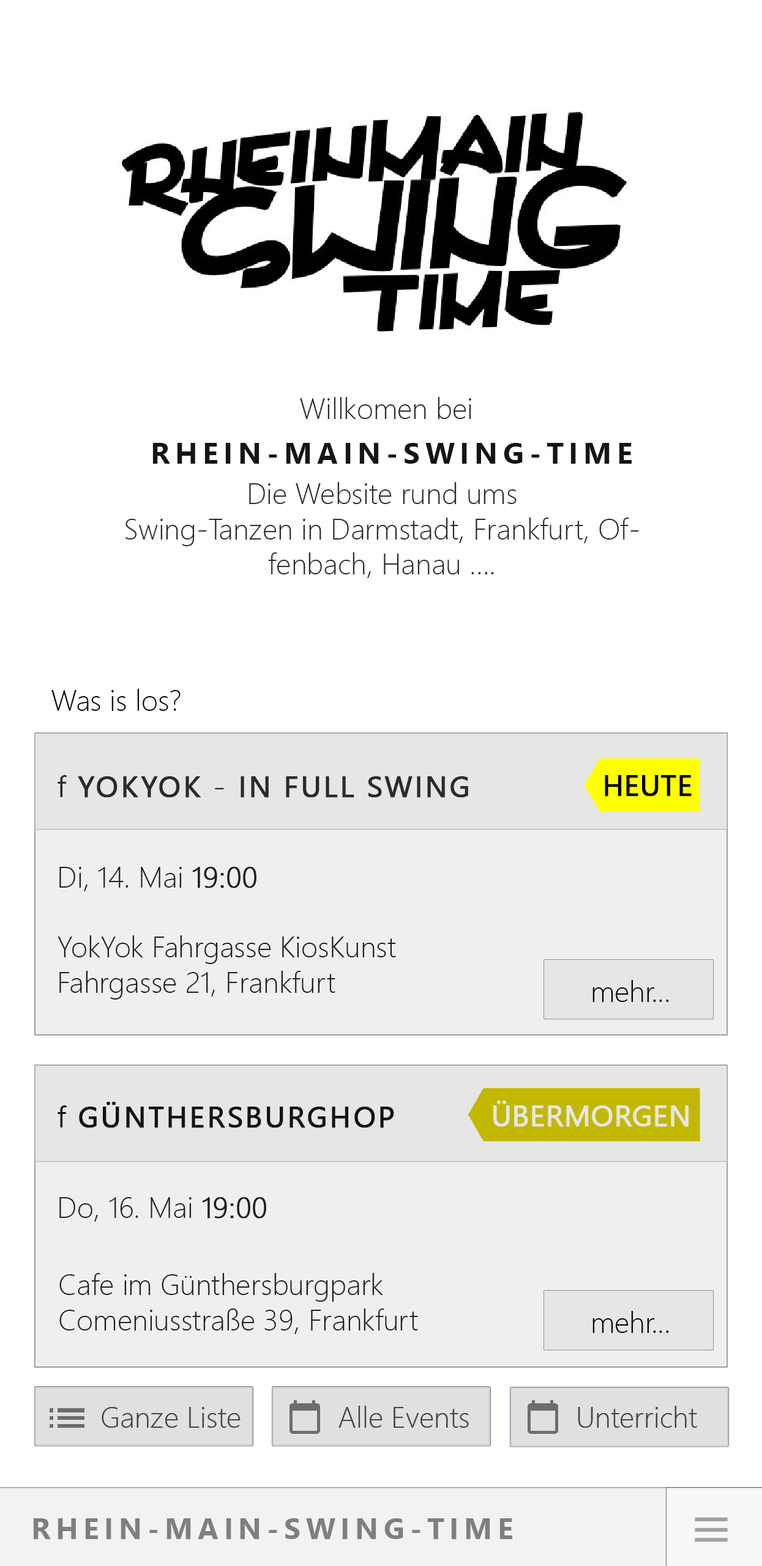
<style>
.page{position:relative;width:762px;height:1566px;background:#ffffff}
.page>*{position:absolute;margin:0}
.t1{font:29.4px "SegoeUI-Light";color:#2e2d2c}
.t2{font:29.4px "SegoeUI-Bold";letter-spacing:0.18em;color:#161616;text-transform:uppercase}
.t3{font:29.4px "SegoeUI-Light";color:#000000}
.t4{font:29.4px "SegoeUI";letter-spacing:0.06em;color:#2b2a29;text-transform:uppercase;font-weight:bold}
.t5{font:29.4px "SegoeUI";letter-spacing:0.06em;color:#2b2a29}
.t6{font:29.4px "SegoeUI";color:#000000;font-weight:bold}
.t7{font:29.4px "SegoeUI-Light";color:#1f1e1e}
.t8{font:29.4px "SegoeUI-Light";color:#1f1e1e;font-weight:bold}
.t9{font:29.4px "SegoeUI";letter-spacing:0.06em;color:#151414;text-transform:uppercase;font-weight:bold}
.t10{font:29.4px "SegoeUI";letter-spacing:0.06em;color:#151414}
.t11{font:29.4px "SegoeUI";color:#e6e6e6;text-transform:uppercase;font-weight:bold}
.t12{font:29.4px "SegoeUI-Light";color:#21201f}
.t13{font:29.4px "SegoeUI-Light";color:#21201f;font-weight:bold}
.t14{font:29.4px "SegoeUI-Light";color:#41464a}
.t15{font:29.4px "SegoeUI-Bold";letter-spacing:0.18em;color:#7e7f7f;text-transform:uppercase}
</style>
<div class="page">
<p class="t1" style="left:300px;top:397px;width:171px;height:22px">Willkomen bei</p>
<p class="t2" style="left:152px;top:443px;width:479px;height:21px">rhein-Main-swing-time</p>
<p class="t1" style="left:125px;top:482px;width:514px;height:96px;text-align:center">Die Website rund ums<br>Swing-Tanzen in Darmstadt, Frankfurt, Offenbach, Hanau ....</p>
<p class="t3" style="left:51px;top:689px;width:129px;height:22px">Was is los?</p>
<p class="t4" style="left:57px;top:775px;width:411px;height:23px"><span class="t5">f </span>YokYok - in full swing</p>
<p class="t6" style="left:604px;top:775px;width:87px;height:21px">HEUTE</p>
<p class="t7" style="left:59px;top:867px;width:197px;height:24px">Di, 14. Mai <span class="t8">19:00</span></p>
<p class="t7" style="left:57px;top:935px;width:339px;height:64px">YokYok Fahrgasse KiosKunst<br>Fahrgasse 21, Frankfurt</p>
<p class="t3" style="left:592px;top:980px;width:77px;height:22px">mehr...</p>
<p class="t9" style="left:57px;top:1102px;width:337px;height:26px"><span class="t10">f </span>Günthersburghop</p>
<p class="t11" style="left:493px;top:1100px;width:195px;height:27px">übermorgen</p>
<p class="t12" style="left:59px;top:1197px;width:207px;height:24px">Do, 16. Mai <span class="t13">19:00</span></p>
<p class="t12" style="left:59px;top:1273px;width:359px;height:61px">Cafe im Günthersburgpark<br>Comeniusstraße 39, Frankfurt</p>
<p class="t3" style="left:592px;top:1311px;width:77px;height:22px">mehr...</p>
<p class="t14" style="left:102px;top:1407px;width:138px;height:21px">Ganze Liste</p>
<p class="t14" style="left:338px;top:1406px;width:131px;height:22px">Alle Events</p>
<p class="t14" style="left:577px;top:1406px;width:120px;height:22px">Unterricht</p>
<p class="t15" style="left:33px;top:1518px;width:479px;height:21px">rhein-Main-swing-time</p>
</div>
